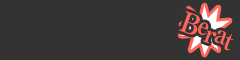
<style>
.page{position:relative;width:240px;height:60px;background:#333333}
.page>*{position:absolute;margin:0}
.t1{font:25.2px "RyuminPro-ExBold";letter-spacing:-0.08em;color:#ff655d;scale:0.9 1}
.t2{font:28px "RyuminPro-ExBold";letter-spacing:-0.08em;color:#ff655d;scale:0.9 1}
</style>
<div class="page">
<p class="t1" style="left:179px;top:11px;width:55px;height:40px;rotate:20deg"><span class="t2">B</span>erat</p>
</div>
